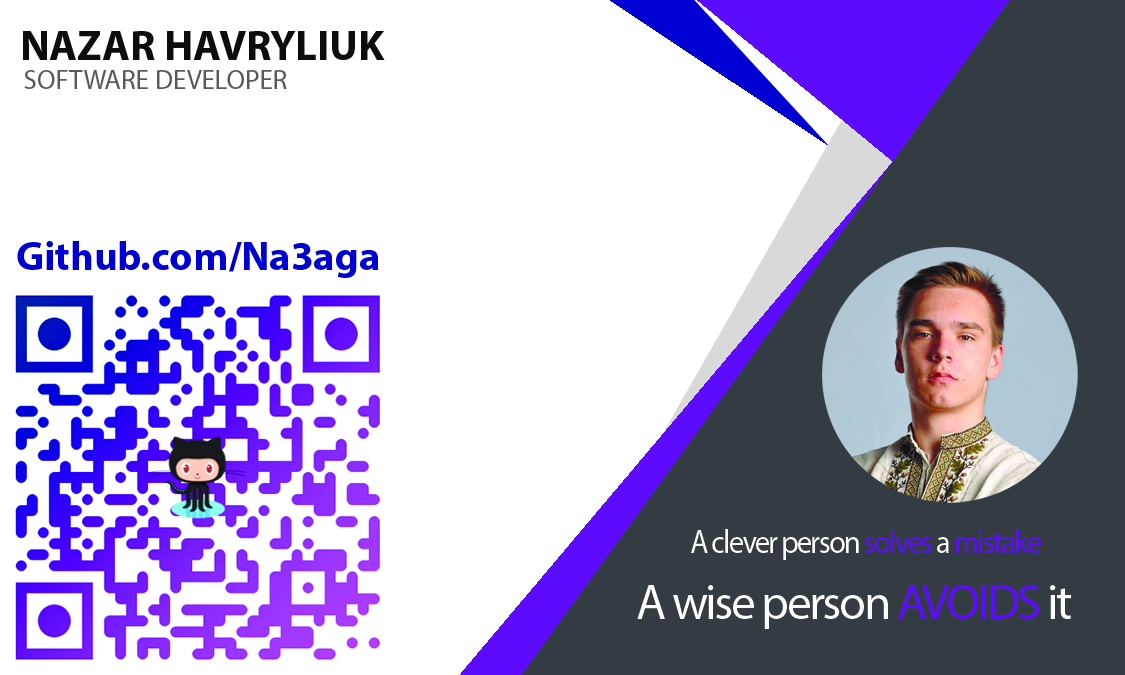
<style>
.page{position:relative;width:1125px;height:675px;background:#ffffff}
.page>*{position:absolute;margin:0}
.t1{font:42.6px "MyriadPro-Bold";color:#0d0d0d}
.t2{font:27.1px "MyriadPro-Regular";color:#595959}
.t3{font:33.3px "MyriadPro-Regular";letter-spacing:-0.05em;color:#ffffff;scale:0.9 1}
.t4{font:33.3px "MyriadPro-Regular";letter-spacing:-0.05em;color:#5d0bff;scale:0.9 1}
.t5{font:49.1px "MyriadPro-Regular";letter-spacing:-0.05em;color:#ffffff}
.t6{font:49.1px "MyriadPro-Regular";letter-spacing:-0.05em;color:#5d0bff}
</style>
<div class="page">
<p class="t1" style="left:23px;top:31px;width:362px;height:29px">NAZAR HAVRYLIUK</p>
<p class="t2" style="left:24px;top:70px;width:263px;height:19px">SOFTWARE DEVELOPER</p>
<p class="t3" style="left:691px;top:529px;width:350px;height:31px">A clever person <span class="t4">solves </span>a <span class="t4">mistake</span></p>
<p class="t5" style="left:637px;top:585px;width:434px;height:44px">A wise person <span class="t6">AVOIDS </span>it</p>
</div>
